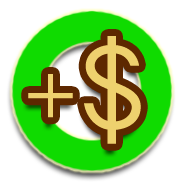
<style>
.page{position:relative;width:185px;height:185px;background:#ffffff}
.page>*{position:absolute;margin:0}
.t1{font:88px "OriyaSangamMN";color:#eed16e}
.t2{font:123px "OriyaSangamMN";color:#eed16e}
</style>
<div class="page">
<p class="t1" style="left:28px;top:36px;width:113px;height:108px">+<span class="t2">$</span></p>
</div>
